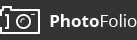
<style>
.page{position:relative;width:137px;height:40px;background:#333333}
.page>*{position:absolute;margin:0}
.t1{font:17px "OpenSans-Bold";color:#ffffff}
.t2{font:17px "OpenSans";color:#ffffff}
</style>
<div class="page">
<p class="t1" style="left:50px;top:14px;width:87px;height:13px">Photo<span class="t2">Folio</span></p>
</div>
